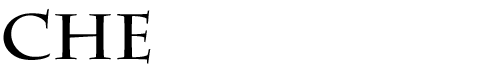
<style>
.page{position:relative;width:500px;height:80px;background:#ffffff}
.page>*{position:absolute;margin:0}
.t1{font:64px "CharlemagneStd-Bold";color:#000000}
</style>
<div class="page">
<p class="t1" style="left:3px;top:8px;width:148px;height:56px">CHE</p>
</div>
